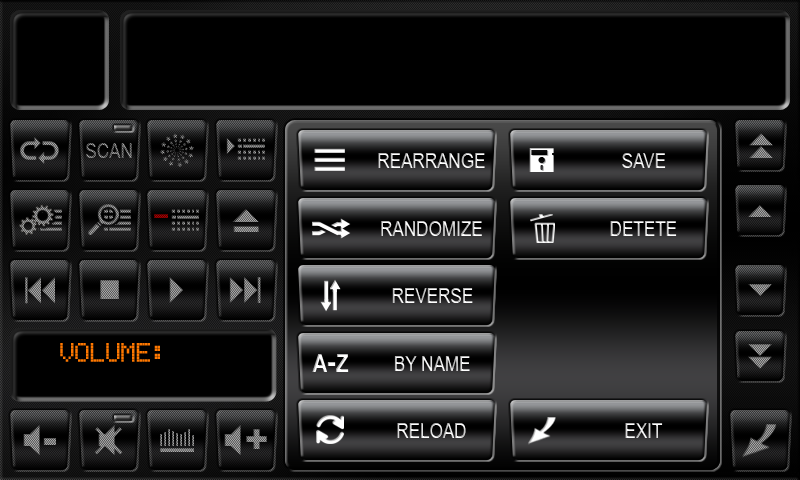
<style>
.page{position:relative;width:800px;height:480px;background:#000000}
.page>*{position:absolute;margin:0}
.t1{font:20.8px "ArialNarrow"}
.t2{font:25px "EricssonGA628";color:#ff7800}
</style>
<div class="page">
<p class="t1" style="left:378px;top:153px;width:107px;height:15px">REARRANGE</p>
<p class="t1" style="left:622px;top:153px;width:44px;height:15px">SAVE</p>
<p class="t1" style="left:381px;top:221px;width:101px;height:15px">RANDOMIZE</p>
<p class="t1" style="left:610px;top:221px;width:67px;height:15px">DETETE</p>
<p class="t1" style="left:392px;top:288px;width:81px;height:15px">REVERSE</p>
<p class="t2" style="left:60px;top:343px;width:100px;height:19px">VOLUME:</p>
<p class="t1" style="left:394px;top:356px;width:76px;height:15px">BY NAME</p>
<p class="t1" style="left:397px;top:423px;width:69px;height:15px">RELOAD</p>
<p class="t1" style="left:625px;top:423px;width:38px;height:15px">EXIT</p>
</div>
